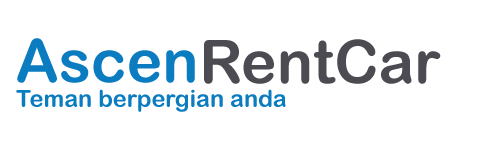
<style>
.page{position:relative;width:500px;height:150px;background:#ffffff}
.page>*{position:absolute;margin:0}
.t1{font:60px "ArialRoundedMTBold";color:#0b7cc0}
.t2{font:60px "ArialRoundedMTBold";color:#4b4b51}
.t3{font:23.5px "ArialRoundedMTBold";color:#0b7cc0}
</style>
<div class="page">
<p class="t1" style="left:17px;top:38px;width:178px;height:45px">Ascen</p>
<p class="t2" style="left:204px;top:39px;width:237px;height:45px">RentCar</p>
<p class="t3" style="left:16px;top:89px;width:270px;height:23px">Teman berpergian anda</p>
</div>
